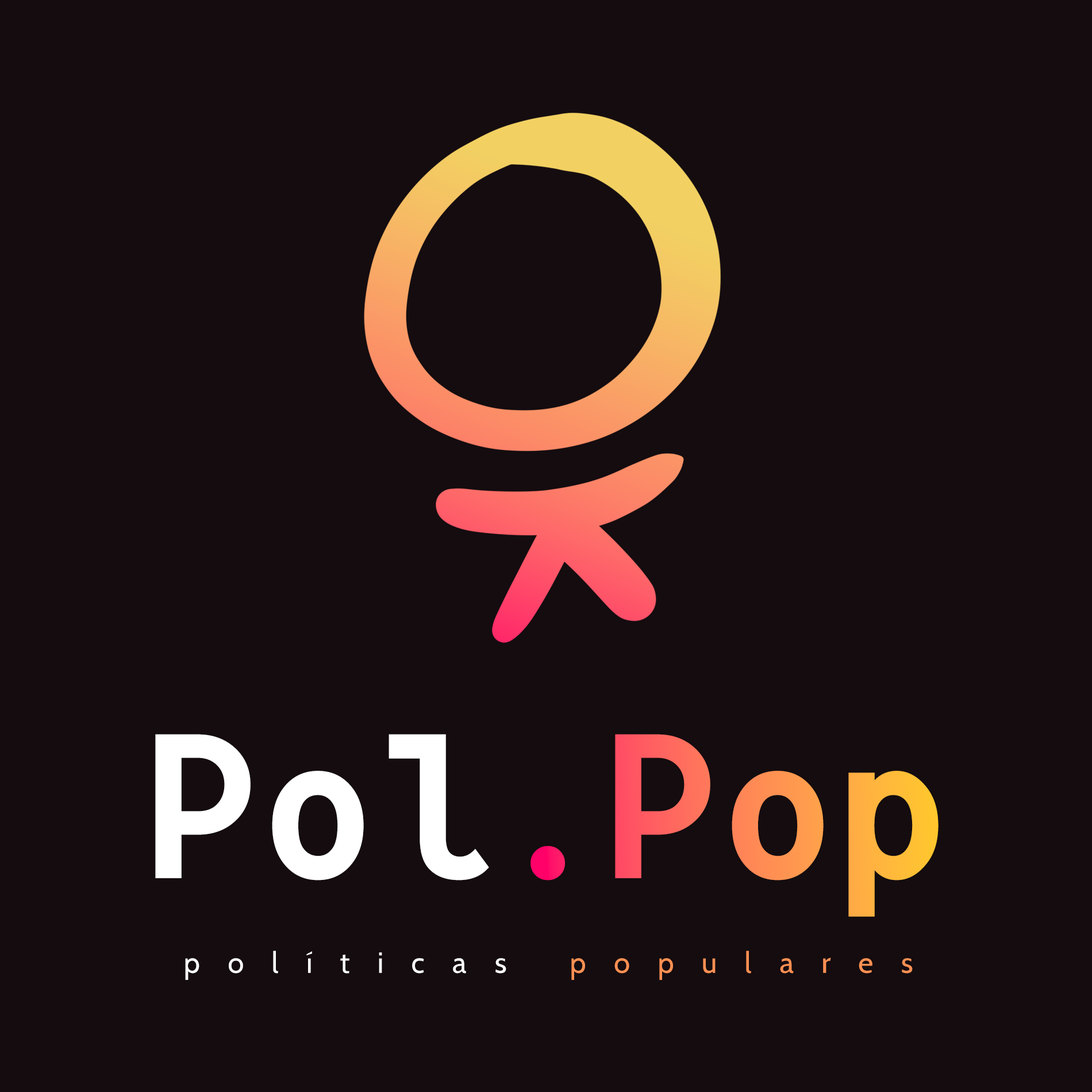
<style>
.page{position:relative;width:1092px;height:1092px;background:#140c0f}
.page>*{position:absolute;margin:0}
.t1{font:196.2px "ConsolaMono-Bold"}
.t2{font:29.4px "Cabin-Regular";letter-spacing:0.96em;color:#ffffff}
.t3{font:29.4px "Cabin-Regular";letter-spacing:0.96em;color:#ff9053}
</style>
<div class="page">
<p class="t1" style="left:155px;top:734px;width:784px;height:183px">Pol.Pop</p>
<p class="t2" style="left:185px;top:951px;width:728px;height:29px">políticas <span class="t3">populares</span></p>
</div>
